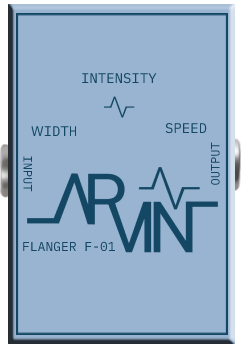
<style>
.page{position:relative;width:241px;height:346px;background:#99b4d1}
.page>*{position:absolute;margin:0}
.t1{font:14px "iAWriterDuospace-Regular";color:#134763}
.t2{font:12px "iAWriterDuospace-Regular";color:#134763}
.t3{font:13px "iAWriterDuospace-Regular";color:#134763}
</style>
<div class="page">
<p class="t1" style="left:82px;top:73px;width:75px;height:11px">INTENSITY</p>
<p class="t1" style="left:31px;top:126px;width:46px;height:10px">WIDTH</p>
<p class="t1" style="left:165px;top:123px;width:42px;height:11px">SPEED</p>
<p class="t2" style="left:210px;top:142px;width:10px;height:43px;rotate:-90deg">OUTPUT</p>
<p class="t2" style="left:23px;top:156px;width:9px;height:36px;rotate:90deg">INPUT</p>
<p class="t3" style="left:23px;top:241px;width:92px;height:11px">FLANGER F-01</p>
</div>
